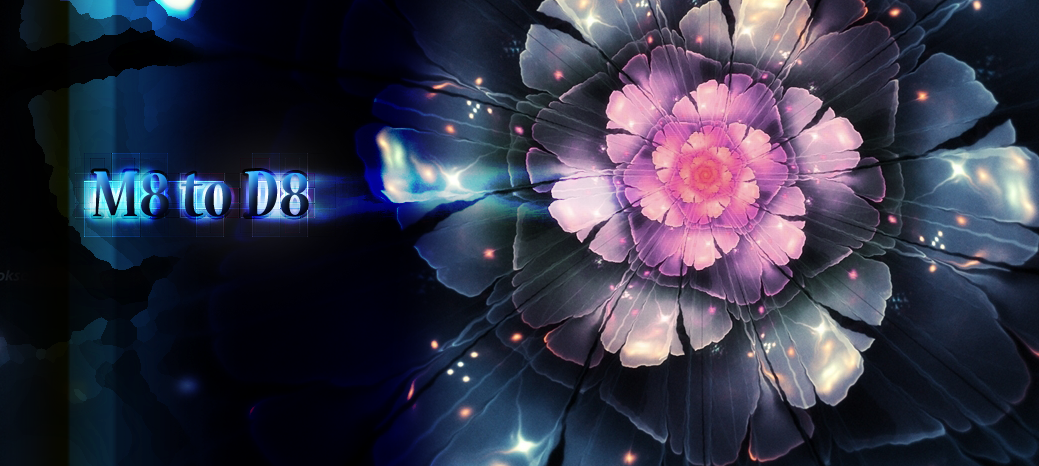
<style>
.page{position:relative;width:1039px;height:466px}
.page>*{position:absolute;margin:0}
.t1{font:71.5px "NuevaStd-BoldCond"}
</style>
<div class="page">
<p class="t1" style="left:93px;top:171px;width:216px;height:46px">M8 to D8</p>
</div>
